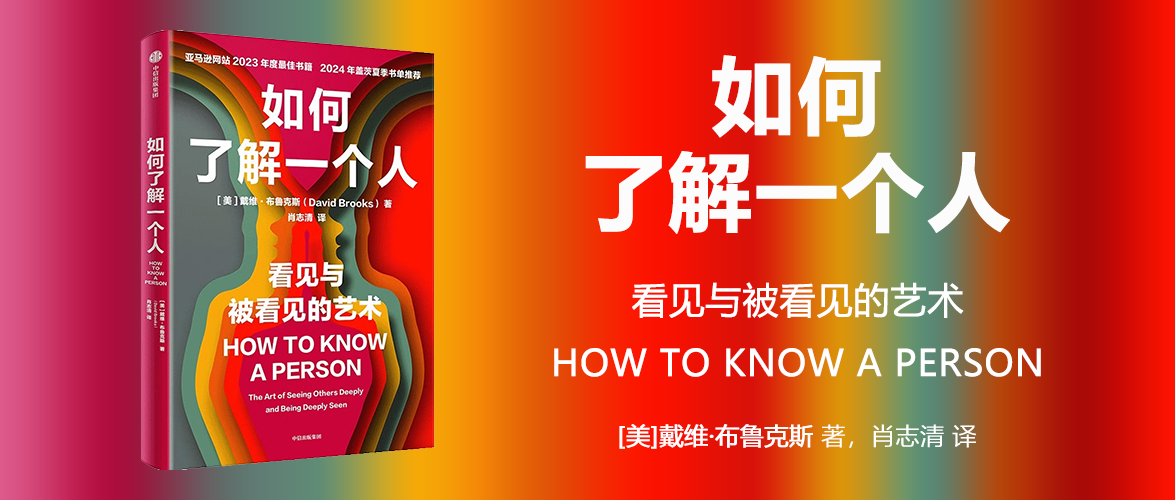
<style>
.page{position:relative;width:1175px;height:500px}
.page>*{position:absolute;margin:0}
.t1{font:84px/96px "MicrosoftYaHei-Bold";color:#fcfcfc;font-weight:bold}
.t2{font:36px "MicrosoftYaHei";color:#ffffff;font-weight:bold}
.t3{font:24px "MicrosoftYaHei";color:#ffffff;font-weight:bold}
.t4{font:24px "MicrosoftYaHeiLight";color:#ffffff;font-weight:bold}
</style>
<div class="page">
<p class="t1" style="left:585px;top:55px;width:425px;height:179px;text-align:center">如何<br>了解一个人</p>
<p class="t2" style="left:554px;top:282px;width:487px;height:95px;text-align:center">看见与被看见的艺术<br>HOW TO KNOW A PERSON</p>
<p class="t3" style="left:619px;top:424px;width:357px;height:25px">[美]戴维·布鲁克斯<span class="t4"> 著，肖志清 译</span></p>
</div>
